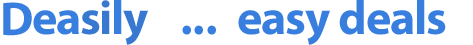
<style>
.page{position:relative;width:473px;height:45px;background:#ffffff}
.page>*{position:absolute;margin:0}
.t1{font:48px "MyriadPro-Bold";letter-spacing:0.025em;color:#387ede}
.t2{font:48px "MyriadPro-Bold";letter-spacing:-0.025em;color:#3878d0}
.t3{font:48px "MyriadPro-Bold";letter-spacing:-0.025em;color:#387ede}
.t4{font:48px "MyriadPro-Bold";color:#387ede}
.t5{font:48px "MyriadPro-Bold";letter-spacing:0.025em;color:#3878d0}
</style>
<div class="page">
<p class="t1" style="left:3px;top:2px;width:29px;height:34px">D</p>
<p class="t2" style="left:81px;top:0px;width:29px;height:35px">si</p>
<p class="t1" style="left:114px;top:0px;width:8px;height:34px">l</p>
<p class="t3" style="left:182px;top:0px;width:264px;height:45px"><span class="t4">...  </span>easy deals</p>
<p class="t3" style="left:33px;top:10px;width:46px;height:25px">ea</p>
<p class="t5" style="left:123px;top:10px;width:25px;height:35px">y</p>
</div>
